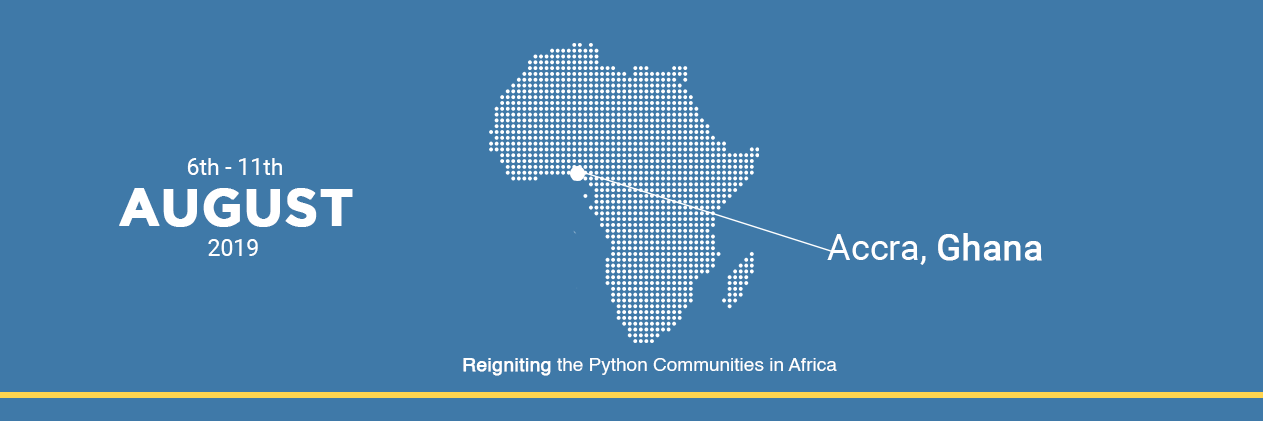
<style>
.page{position:relative;width:1263px;height:421px;background:#3f79a8}
.page>*{position:absolute;margin:0}
.t1{font:23px "Roboto-Regular";color:#ffffff}
.t2{font:52px "Gotham-Bold";color:#ffffff;font-weight:bold}
.t3{font:36px "Roboto-Regular";color:#ffffff}
.t4{font:36px "Roboto-Regular";color:#ffffff;font-weight:bold}
.t5{font:19px "Helvetica";color:#ffffff}
.t6{font:19px "Helvetica";color:#ffffff;font-weight:bold}
</style>
<div class="page">
<p class="t1" style="left:187px;top:158px;width:95px;height:17px">6th - 11th</p>
<p class="t2" style="left:119px;top:188px;width:234px;height:39px">AUGUST</p>
<p class="t3" style="left:827px;top:233px;width:215px;height:32px">Accra, <span class="t4">Ghana</span></p>
<p class="t1" style="left:208px;top:239px;width:50px;height:17px">2019</p>
<p class="t5" style="left:463px;top:358px;width:374px;height:18px"><span class="t6">Reigniting</span> the Python Communities in Africa</p>
</div>
